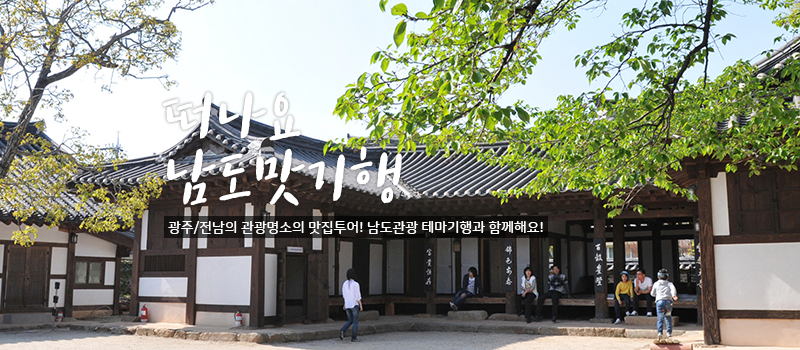
<style>
.page{position:relative;width:800px;height:350px}
.page>*{position:absolute;margin:0}
.t1{font:80px/60px "tvNEnjoystoriesB";color:#ffffff}
.t2{font:14px "NanumSquareRoundB";color:#ffffff}
</style>
<div class="page">
<p class="t1" style="left:162px;top:92px;width:240px;height:114px">떠나요<br>남도맛기행</p>
<p class="t2" style="left:168px;top:221px;width:375px;height:13px">광주/전남의 관광명소의 맛집투어! 남도관광 테마기행과 함께해요!</p>
</div>
